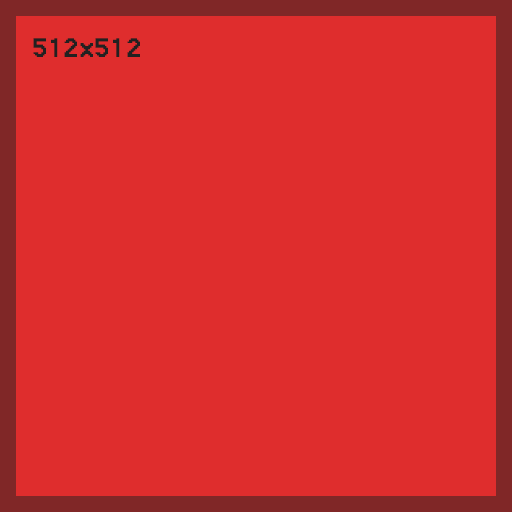
<style>
.page{position:relative;width:512px;height:512px;background:#df2d2d}
.page>*{position:absolute;margin:0}
.t1{font:33.3px "8514oem";color:#222121}
</style>
<div class="page">
<p class="t1" style="left:33px;top:38px;width:107px;height:19px">512x512</p>
</div>
